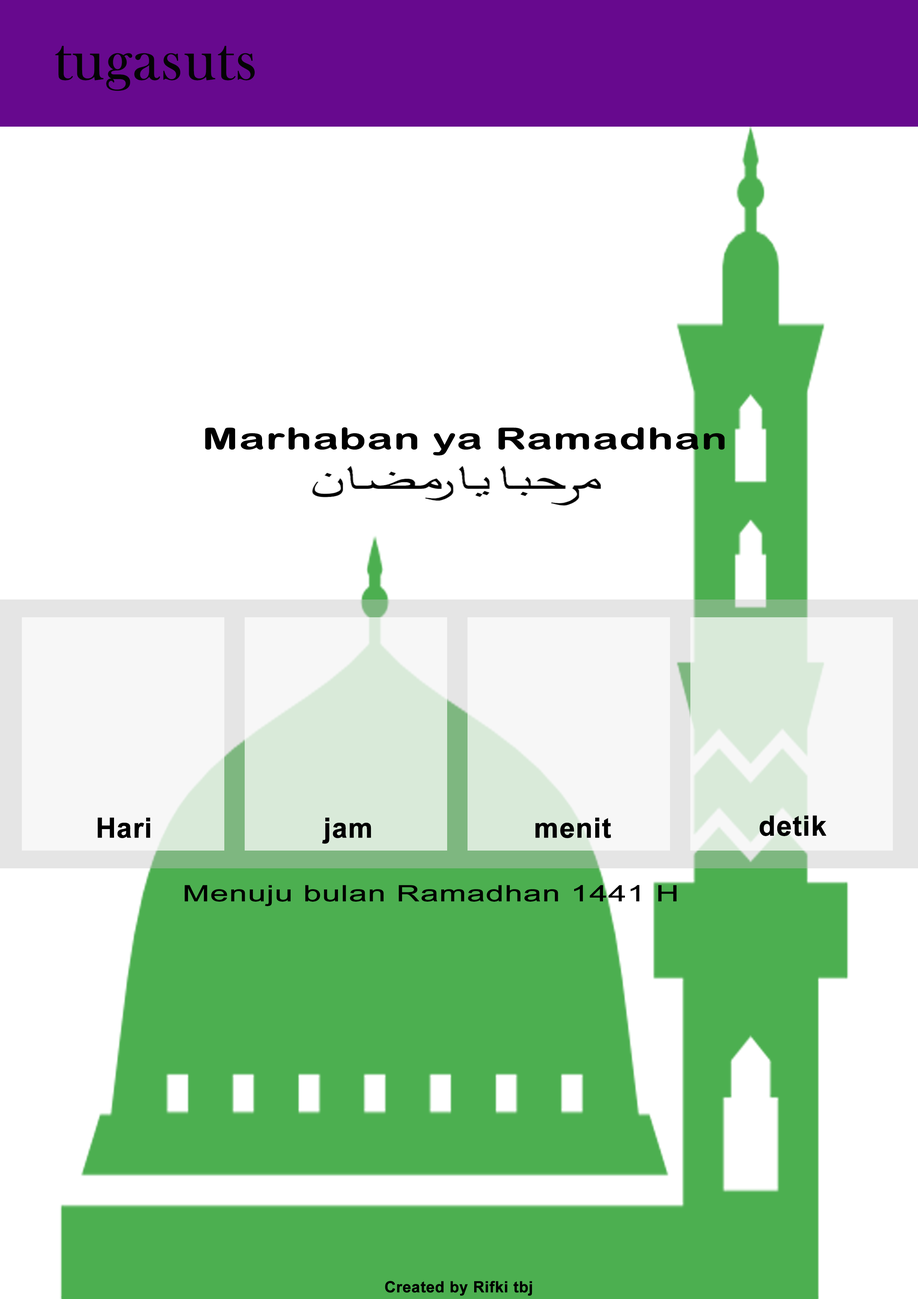
<style>
.page{position:relative;width:918px;height:1299px;background:#ffffff}
.page>*{position:absolute;margin:0}
.t1{font:61.7px "BaskOldFace";color:#040404;font-weight:bold}
.t2{font:29.7px "ArialRoundedMTBold";color:#000000;font-weight:bold;scale:1.45 1}
.t3{font:27.8px "Arial-BoldMT";color:#000000;font-weight:bold}
.t4{font:22.3px "ArialMT";color:#000000;font-weight:bold;scale:1.45 1}
.t5{font:15.4px "Arial-BoldMT";color:#000000;font-weight:bold}
</style>
<div class="page">
<p class="t1" style="left:55px;top:46px;width:200px;height:45px">tugasuts</p>
<p class="t2" style="left:205px;top:427px;width:520px;height:28px">Marhaban ya Ramadhan</p>
<p class="t3" style="left:98px;top:817px;width:52px;height:21px">Hari</p>
<p class="t3" style="left:322px;top:817px;width:49px;height:27px">jam</p>
<p class="t3" style="left:535px;top:817px;width:76px;height:21px">menit</p>
<p class="t3" style="left:760px;top:815px;width:67px;height:21px">detik</p>
<p class="t4" style="left:185px;top:885px;width:492px;height:21px">Menuju bulan Ramadhan 1441 H</p>
<p class="t5" style="left:385px;top:1281px;width:147px;height:14px">Created by Rifki tbj</p>
</div>
